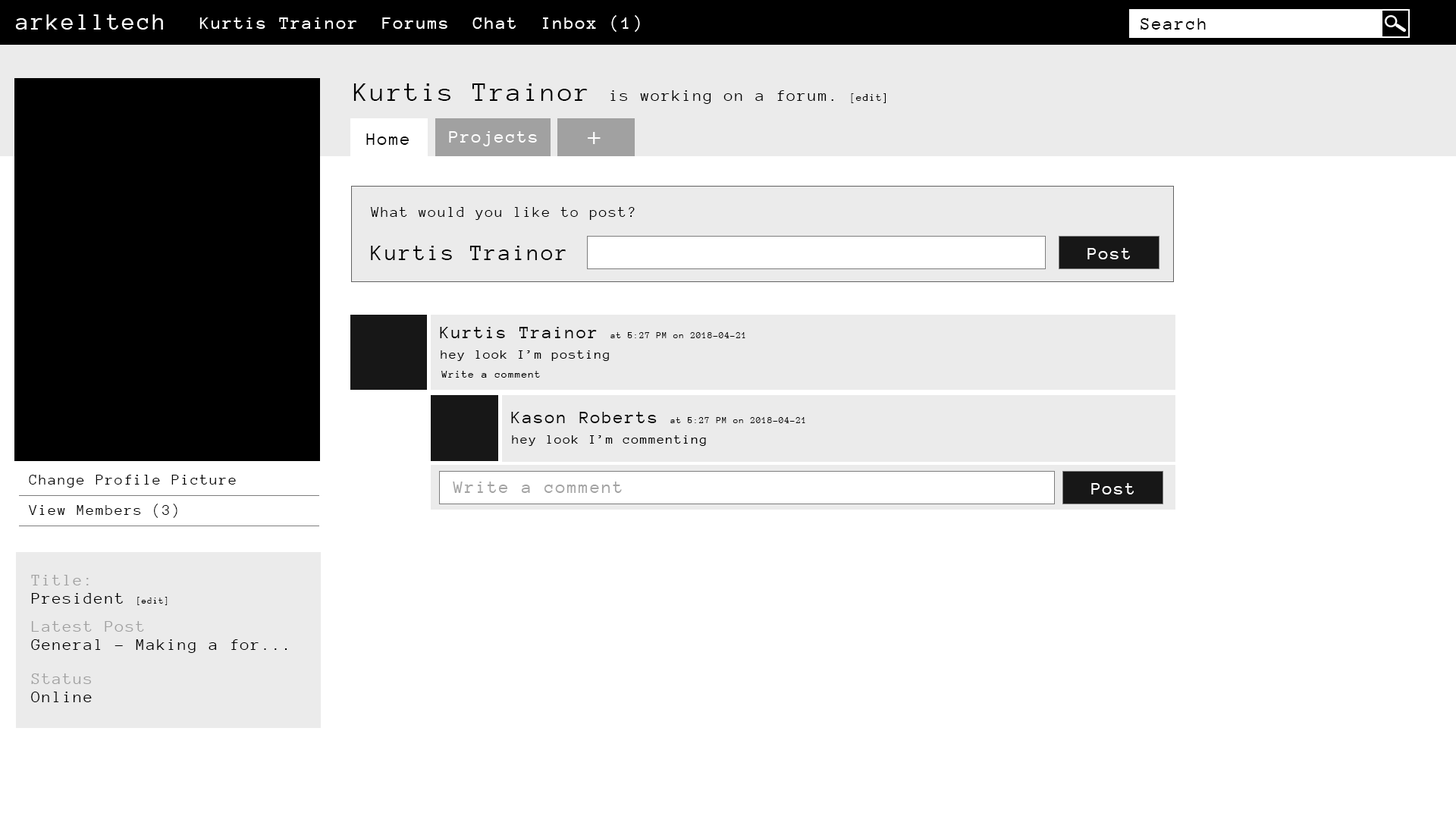
<style>
.page{position:relative;width:1456px;height:819px;background:#ffffff}
.page>*{position:absolute;margin:0}
.t1{font:24.3px "AnonymousPro";letter-spacing:0.08em;color:#ffffff}
.t2{font:18.2px "AnonymousPro";letter-spacing:0.08em;color:#ffffff}
.t3{font:18.2px "AnonymousPro";letter-spacing:0.08em;color:#000000}
.t4{font:16.7px "AnonymousPro";letter-spacing:0.08em;color:#000000}
.t5{font:27.3px "AnonymousPro";letter-spacing:0.08em;color:#000000}
.t6{font:10.6px "AnonymousPro";letter-spacing:0.08em;color:#000000}
.t7{font:27.3px "AnonymousPro";letter-spacing:0.08em;color:#ffffff}
.t8{font:15.2px "AnonymousPro";letter-spacing:0.08em;color:#000000}
.t9{font:22.7px "AnonymousPro";letter-spacing:0.08em;color:#000000}
.t10{font:9.1px "AnonymousPro";letter-spacing:0.08em;color:#000000}
.t11{font:13.6px "AnonymousPro";letter-spacing:0.08em;color:#000000}
.t12{font:18.2px "AnonymousPro";letter-spacing:0.08em;color:#a3a3a3}
.t13{font:16.7px "AnonymousPro";letter-spacing:0.08em;color:#a1a1a1}
.t14{font:16.7px "AnonymousPro";letter-spacing:0.08em;color:#010101}
.t15{font:9.1px "AnonymousPro";letter-spacing:0.08em;color:#010101}
</style>
<div class="page">
<p class="t1" style="left:15px;top:14px;width:148px;height:16px">arkelltech</p>
<p class="t2" style="left:199px;top:15px;width:441px;height:17px">Kurtis Trainor  Forums  Chat  Inbox (1)</p>
<p class="t3" style="left:1141px;top:18px;width:65px;height:12px">Search</p>
<p class="t4" style="left:353px;top:83px;width:533px;height:21px"><span class="t5">Kurtis Trainor </span>is working on a forum. <span class="t6">[edit]</span></p>
<p class="t3" style="left:366px;top:133px;width:43px;height:12px">Home</p>
<p class="t2" style="left:449px;top:131px;width:88px;height:15px">Projects</p>
<p class="t7" style="left:588px;top:132px;width:13px;height:12px">+</p>
<p class="t8" style="left:370px;top:207px;width:265px;height:13px">What would you like to post?</p>
<p class="t9" style="left:371px;top:246px;width:195px;height:14px">Kurtis Trainor</p>
<p class="t2" style="left:1087px;top:248px;width:43px;height:11px">Post</p>
<p class="t10" style="left:440px;top:327px;width:305px;height:11px"><span class="t3">Kurtis Trainor </span>at 5:27 PM on 2018-04-21</p>
<p class="t11" style="left:441px;top:350px;width:168px;height:11px">hey look I’m posting</p>
<p class="t6" style="left:441px;top:371px;width:99px;height:7px">Write a comment</p>
<p class="t10" style="left:511px;top:412px;width:294px;height:11px"><span class="t3">Kason Roberts </span>at 5:27 PM on 2018-04-21</p>
<p class="t11" style="left:512px;top:435px;width:194px;height:11px">hey look I’m commenting</p>
<p class="t8" style="left:29px;top:475px;width:207px;height:13px">Change Profile Picture</p>
<p class="t12" style="left:453px;top:482px;width:169px;height:11px">Write a comment</p>
<p class="t2" style="left:1091px;top:483px;width:43px;height:11px">Post</p>
<p class="t8" style="left:28px;top:504px;width:149px;height:14px">View Members (3)</p>
<p class="t13" style="left:31px;top:575px;width:58px;height:10px">Title:</p>
<p class="t14" style="left:31px;top:593px;width:137px;height:12px">President <span class="t15">[edit]</span></p>
<p class="t13" style="left:31px;top:621px;width:113px;height:11px">Latest Post</p>
<p class="t14" style="left:31px;top:639px;width:256px;height:14px">General - Making a for...</p>
<p class="t13" style="left:31px;top:673px;width:60px;height:11px">Status</p>
<p class="t14" style="left:31px;top:692px;width:61px;height:10px">Online</p>
</div>
